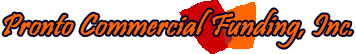
<style>
.page{position:relative;width:356px;height:54px;background:#ffffff}
.page>*{position:absolute;margin:0}
.t1{font:30px "Pristina-Regular";color:#ff6600;font-weight:bold;font-style:italic}
</style>
<div class="page">
<p class="t1" style="left:3px;top:9px;width:350px;height:39px">Pronto Commercial Funding, Inc.</p>
</div>
